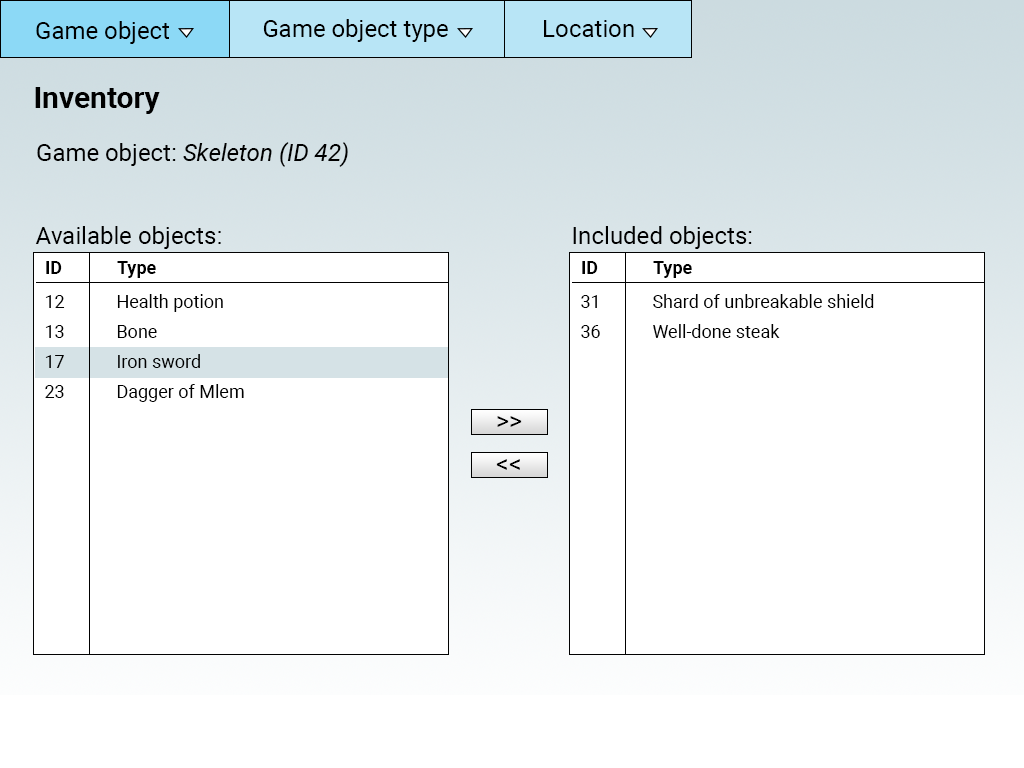
<style>
.page{position:relative;width:1024px;height:768px;background:#ffffff}
.page>*{position:absolute;margin:0}
.t1{font:24px "Roboto-Regular";color:#000000}
.t2{font:30px "Roboto-Bold";color:#000000}
.t3{font:24px "Roboto-Italic";color:#000000}
.t4{font:18px "Roboto-Bold";color:#000000}
.t5{font:18px/30px "Roboto-Regular";color:#000000}
.t6{font:25px "Roboto-Regular";color:#000000}
</style>
<div class="page">
<p class="t1" style="left:36px;top:21px;width:133px;height:23px">Game object</p>
<p class="t1" style="left:263px;top:19px;width:185px;height:23px">Game object type</p>
<p class="t1" style="left:544px;top:20px;width:90px;height:17px">Location</p>
<p class="t2" style="left:35px;top:87px;width:125px;height:27px">Inventory</p>
<p class="t3" style="left:37px;top:142px;width:311px;height:25px"><span class="t1">Game object: </span>Skeleton (ID 42)</p>
<p class="t1" style="left:35px;top:226px;width:186px;height:23px">Available objects:</p>
<p class="t1" style="left:573px;top:226px;width:179px;height:23px">Included objects:</p>
<p class="t4" style="left:46px;top:261px;width:110px;height:17px">ID  Type</p>
<p class="t4" style="left:582px;top:261px;width:110px;height:17px">ID  Type</p>
<p class="t5" style="left:45px;top:294px;width:199px;height:108px">12  Health potion<br>13  Bone<br>17  Iron sword<br>23  Dagger of Mlem</p>
<p class="t5" style="left:581px;top:294px;width:293px;height:44px">31  Shard of unbreakable shield<br>36  Well-done steak</p>
<p class="t6" style="left:497px;top:416px;width:25px;height:11px">&gt;&gt;</p>
<p class="t6" style="left:496px;top:459px;width:24px;height:11px">&lt;&lt;</p>
</div>
